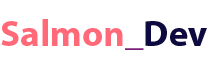
<style>
.page{position:relative;width:209px;height:70px;background:#ffffff}
.page>*{position:absolute;margin:0}
.t1{font:37px "MyriadPro-Bold";color:#ff6978}
.t2{font:37px "MyriadPro-Bold";color:#7b1e7a}
.t3{font:37px "MyriadPro-Bold";color:#0c0a3e}
</style>
<div class="page">
<p class="t1" style="left:1px;top:19px;width:206px;height:31px">Salmon<span class="t2">_</span><span class="t3">Dev</span></p>
</div>
